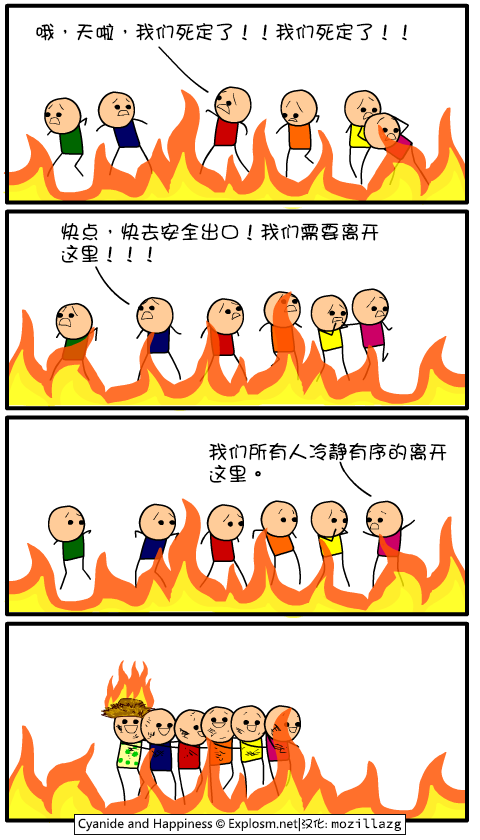
<style>
.page{position:relative;width:480px;height:840px;background:#ffffff}
.page>*{position:absolute;margin:0}
.t1{font:20px "DFGirl";color:#000000}
.t2{font:20px/22px "DFGirl";color:#000000}
</style>
<div class="page">
<p class="t1" style="left:36px;top:23px;width:371px;height:18px">哦，天啦，我们死定了！！我们死定了！！</p>
<p class="t2" style="left:61px;top:222px;width:318px;height:41px">快点，快去安全出口！我们需要离开<br>这里！！！</p>
<p class="t2" style="left:208px;top:442px;width:239px;height:41px">我们所有人冷静有序的离开<br>这里。</p>
</div>
